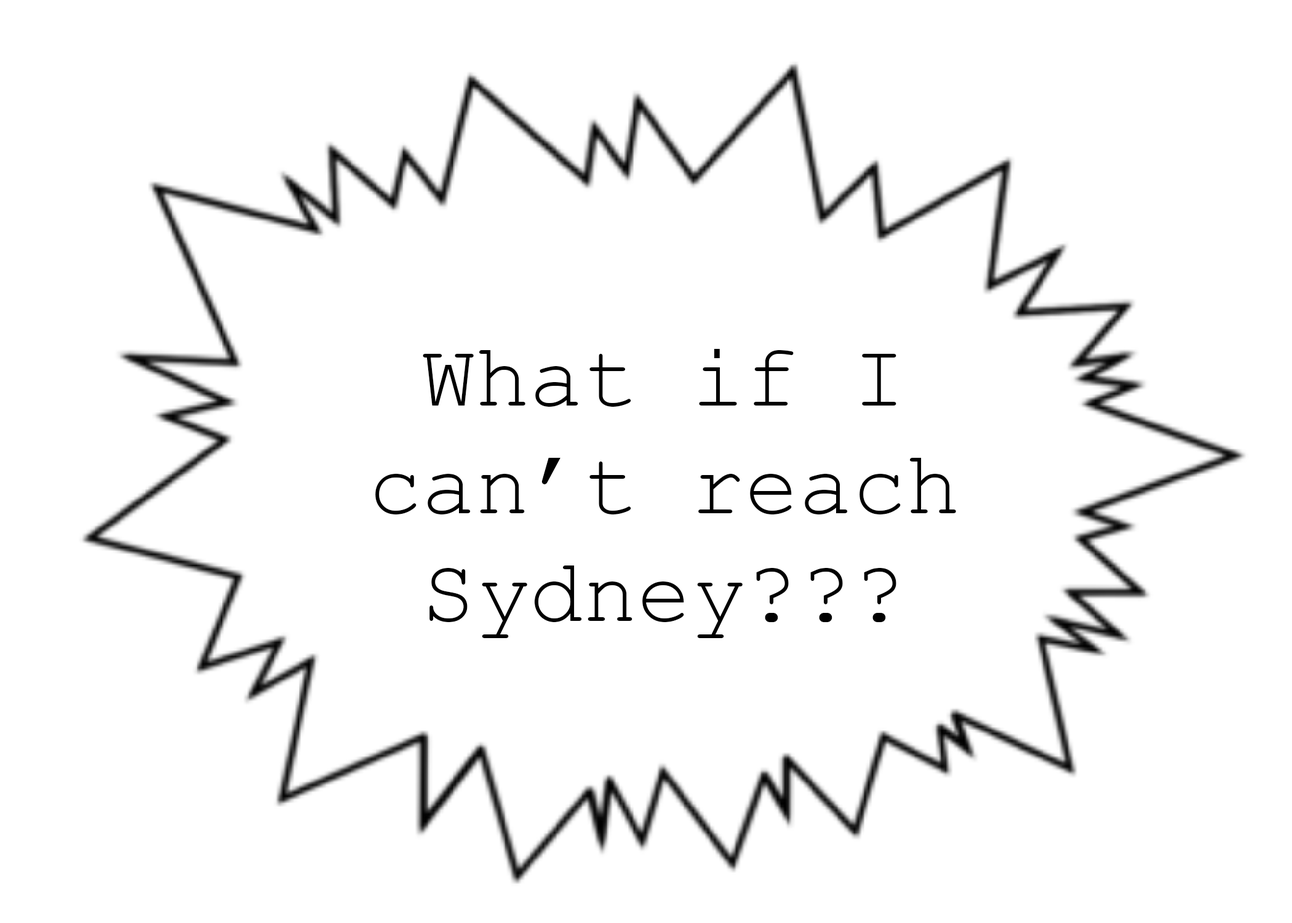
<style>
.page{position:relative;width:1292px;height:923px;background:#ffffff}
.page>*{position:absolute;margin:0}
.t1{font:89.7px "CourierNewPSMT";color:#000000}
</style>
<div class="page">
<p class="t1" style="left:375px;top:349px;width:581px;height:289px;text-align:center">What if I can’t reach Sydney???</p>
</div>
